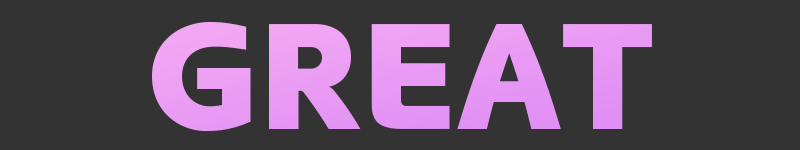
<style>
.page{position:relative;width:800px;height:150px;background:#333333}
.page>*{position:absolute;margin:0}
.t1{font:153px "KyrialDisplayProBlack";color:#e99bf4}
</style>
<div class="page">
<p class="t1" style="left:152px;top:21px;width:500px;height:111px">GREAT</p>
</div>
